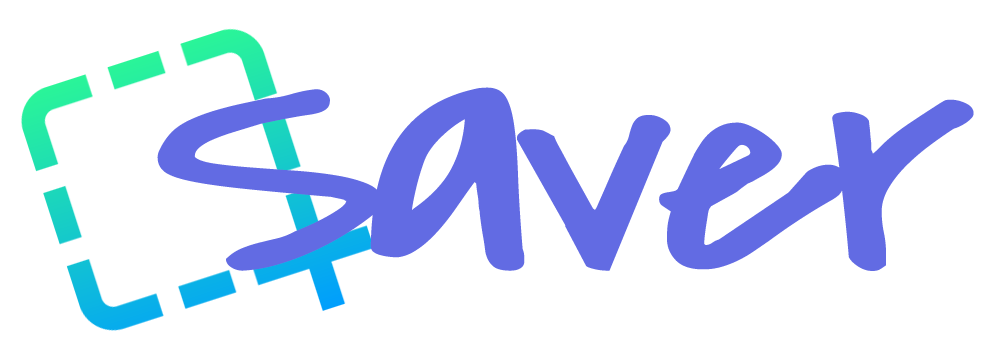
<style>
.page{position:relative;width:1000px;height:354px;background:#ffffff}
.page>*{position:absolute;margin:0}
.t1{font:325.5px "CoveredByYourGrace";letter-spacing:-0.06em;color:#626be3;scale:1.37 1}
</style>
<div class="page">
<p class="t1" style="left:157px;top:87px;width:817px;height:184px">Saver</p>
</div>
